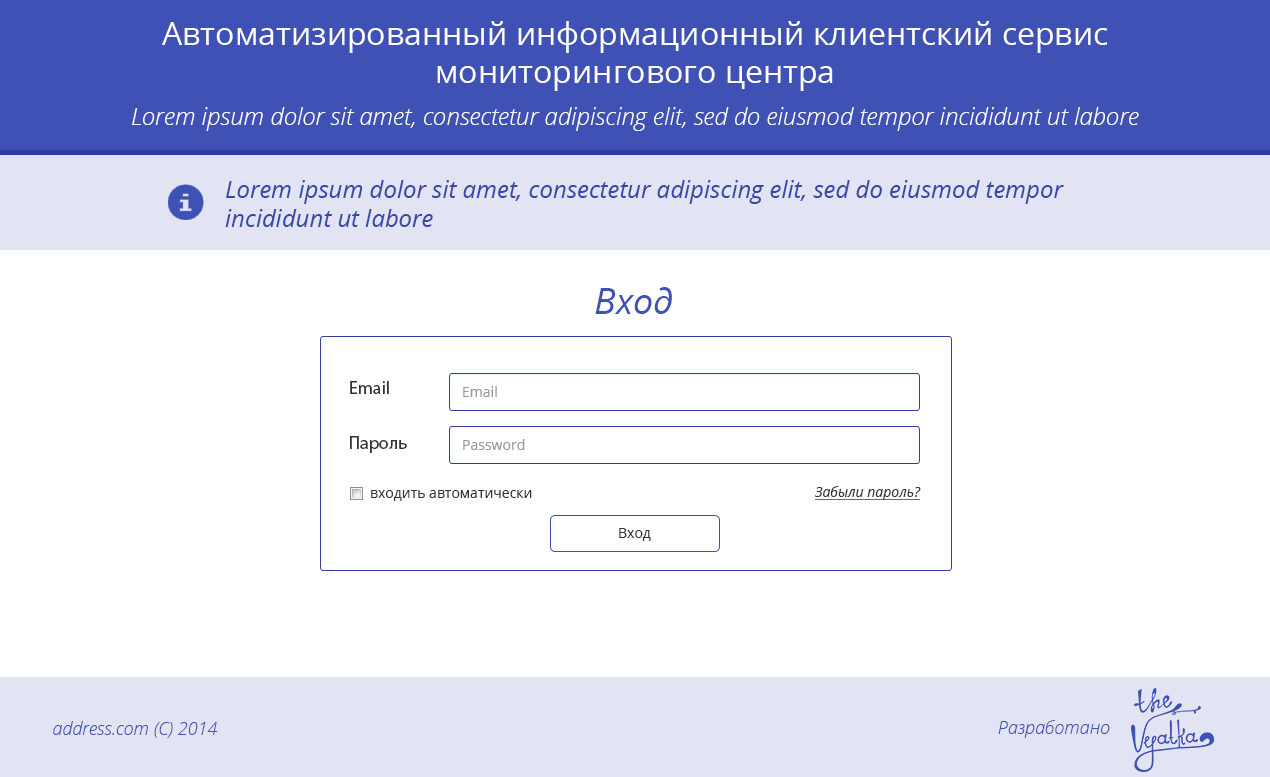
<style>
.page{position:relative;width:1270px;height:777px;background:#ffffff}
.page>*{position:absolute;margin:0}
.t1{font:32px "OpenSans";color:#ffffff}
.t2{font:24px "OpenSansLight-Italic";color:#ffffff}
.t3{font:24px "OpenSans-Italic";color:#3848aa}
.t4{font:36px "OpenSans-Italic";color:#3f51b5}
.t5{font:18px "OpenSans-Bold";color:#333333}
.t6{font:14px "OpenSans";color:#999999}
.t7{font:14px "OpenSans-Italic";color:#333333;text-decoration:underline}
.t8{font:14px "OpenSans";color:#333333}
.t9{font:18px "OpenSansLight-Italic";color:#3f51b5}
</style>
<div class="page">
<p class="t1" style="left:162px;top:21px;width:946px;height:70px;text-align:center">Автоматизированный информационный клиентский сервис<br>мониторингового центра</p>
<p class="t2" style="left:132px;top:107px;width:1007px;height:24px">Lorem ipsum dolor sit amet, consectetur adipiscing elit, sed do eiusmod tempor incididunt ut labore</p>
<p class="t3" style="left:225px;top:180px;width:839px;height:47px">Lorem ipsum dolor sit amet, consectetur adipiscing elit, sed do eiusmod tempor incididunt ut labore</p>
<p class="t4" style="left:595px;top:287px;width:77px;height:27px">Вход</p>
<p class="t5" style="left:350px;top:381px;width:39px;height:13px">Email</p>
<p class="t6" style="left:463px;top:386px;width:34px;height:11px">Email</p>
<p class="t5" style="left:350px;top:436px;width:57px;height:17px">Пароль</p>
<p class="t6" style="left:463px;top:439px;width:62px;height:11px">Password</p>
<p class="t7" style="left:814px;top:486px;width:107px;height:14px">Забыли пароль?</p>
<p class="t8" style="left:371px;top:490px;width:161px;height:11px">входить автоматически</p>
<p class="t8" style="left:619px;top:528px;width:32px;height:13px">Вход</p>
<p class="t9" style="left:53px;top:721px;width:165px;height:17px">address.com (C) 2014</p>
<p class="t9" style="left:998px;top:720px;width:112px;height:18px">Разработано</p>
</div>
